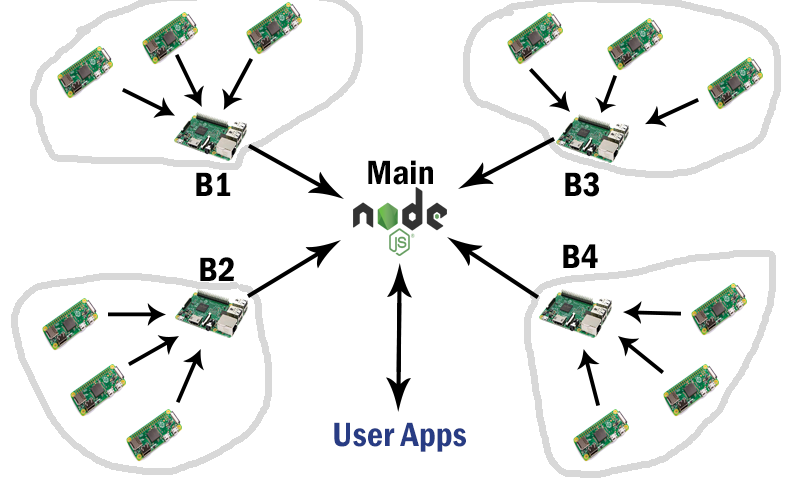
<style>
.page{position:relative;width:800px;height:480px;background:#ffffff}
.page>*{position:absolute;margin:0}
.t1{font:35px "FranklinGothic-DemiCond";letter-spacing:0.005em;color:#000000}
.t2{font:35px "FranklinGothic-DemiCond";letter-spacing:0.005em;color:#283c84}
</style>
<div class="page">
<p class="t1" style="left:368px;top:160px;width:65px;height:25px">Main</p>
<p class="t1" style="left:196px;top:172px;width:35px;height:24px">B1</p>
<p class="t1" style="left:565px;top:172px;width:34px;height:25px">B3</p>
<p class="t1" style="left:563px;top:244px;width:35px;height:24px">B4</p>
<p class="t1" style="left:200px;top:257px;width:34px;height:24px">B2</p>
<p class="t2" style="left:334px;top:422px;width:132px;height:30px">User Apps</p>
</div>
